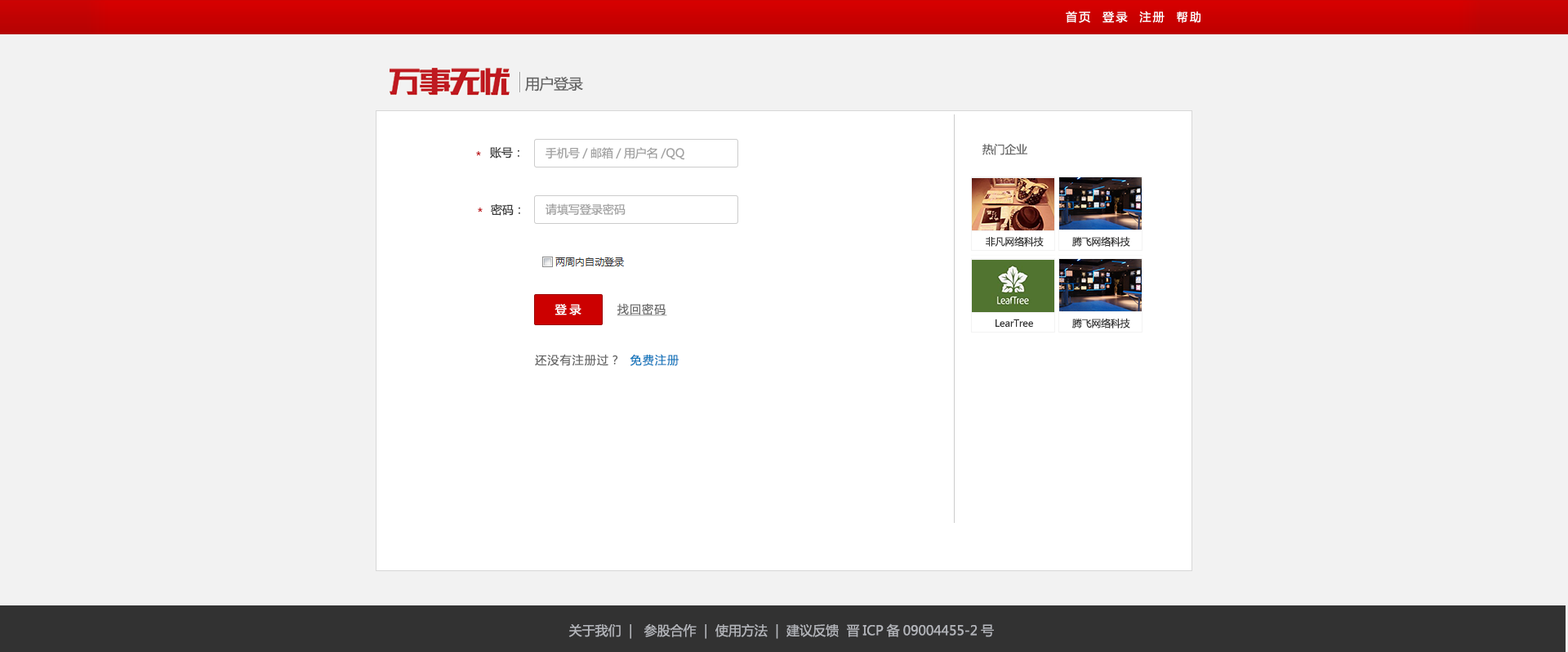
<style>
.page{position:relative;width:1568px;height:652px;background:#f2f2f2}
.page>*{position:absolute;margin:0}
.t1{font:11.4px "MicrosoftYaHei";letter-spacing:0.16em;color:#ffffff}
.t2{font:14.7px "MicrosoftYaHei";letter-spacing:-0.02em;color:#666666}
.t3{font:11.4px "MicrosoftYaHei";color:#383838}
.t4{font:11.4px "MicrosoftYaHei";color:#a3a3a3}
.t5{font:11.4px "MicrosoftYaHei";letter-spacing:-0.02em;color:#666666}
.t6{font:11.4px "MicrosoftYaHei";color:#bf1a20}
.t7{font:9.8px "MicrosoftYaHei";letter-spacing:-0.02em;color:#323232}
.t8{font:11.4px "MicrosoftYaHei";letter-spacing:0.26em;color:#ffffff}
.t9{font:11.4px "MicrosoftYaHei";letter-spacing:0.08em;color:#666666;text-decoration:underline}
.t10{font:11.4px "MicrosoftYaHei";letter-spacing:0.08em;color:#666666}
.t11{font:11.4px "MicrosoftYaHei";letter-spacing:0.08em;color:#1278bd}
.t12{font:13.1px "MicrosoftYaHei";color:#b3b5ba}
</style>
<div class="page">
<p class="t1" style="left:1066px;top:11px;width:134px;height:12px">首页  登录  注册  帮助</p>
<p class="t2" style="left:525px;top:76px;width:58px;height:15px">用户登录</p>
<p class="t3" style="left:490px;top:147px;width:29px;height:11px">账号：</p>
<p class="t4" style="left:546px;top:147px;width:138px;height:13px">手机号/邮箱/用户名/QQ</p>
<p class="t5" style="left:982px;top:144px;width:45px;height:11px">热门企业</p>
<p class="t6" style="left:476px;top:151px;width:5px;height:5px">*</p>
<p class="t6" style="left:478px;top:207px;width:5px;height:5px">*</p>
<p class="t3" style="left:491px;top:203px;width:29px;height:13px">密码：</p>
<p class="t4" style="left:546px;top:203px;width:80px;height:13px">请填写登录密码</p>
<p class="t7" style="left:986px;top:236px;width:58px;height:11px">非凡网络科技</p>
<p class="t7" style="left:1072px;top:236px;width:58px;height:11px">腾飞网络科技</p>
<p class="t8" style="left:555px;top:304px;width:26px;height:11px">登录</p>
<p class="t9" style="left:617px;top:303px;width:50px;height:13px">找回密码</p>
<p class="t7" style="left:1072px;top:318px;width:58px;height:10px">腾飞网络科技</p>
<p class="t7" style="left:996px;top:318px;width:37px;height:9px">LearTree</p>
<p class="t10" style="left:535px;top:354px;width:144px;height:12px">还没有注册过？  <span class="t11">免费注册</span></p>
<p class="t12" style="left:568px;top:623px;width:426px;height:16px">关于我们  |   参股合作  |  使用方法  |  建议反馈  晋ICP备09004455-2号</p>
</div>
